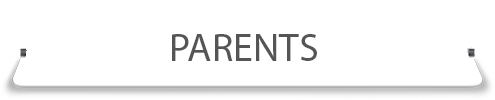
<style>
.page{position:relative;width:495px;height:100px;background:#ffffff}
.page>*{position:absolute;margin:0}
.t1{font:40px "MyriadPro-Regular";color:#555555}
</style>
<div class="page">
<p class="t1" style="left:172px;top:34px;width:145px;height:27px">PARENTS</p>
</div>
